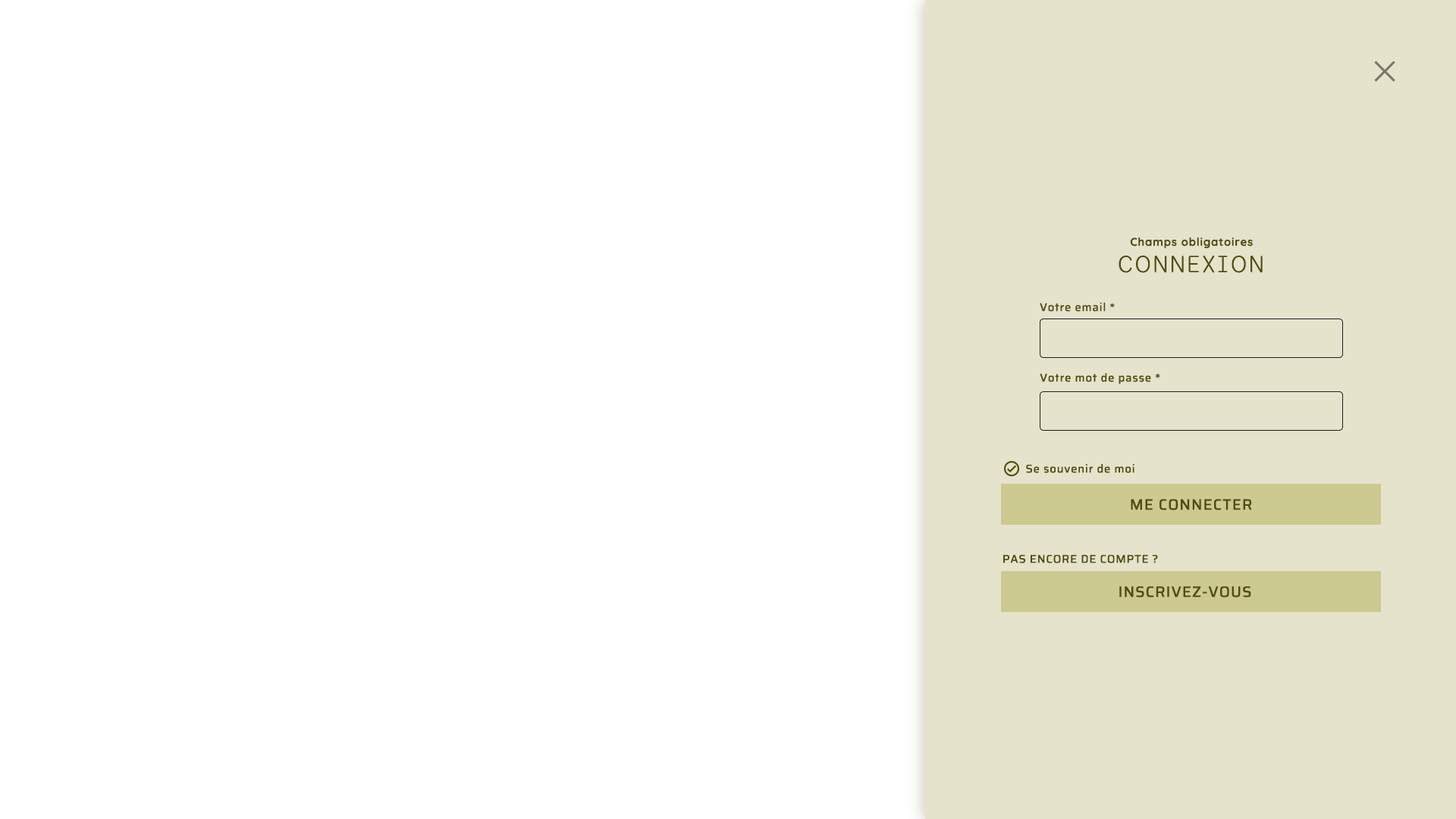
<style>
.page{position:relative;width:1456px;height:819px;background:#ffffff}
.page>*{position:absolute;margin:0}
.t1{font:11.4px "Quicksand-Bold";letter-spacing:0.05em;color:#524b0b}
.t2{font:26.5px "Sono-Light";letter-spacing:0.05em;color:#524b0b}
.t3{font:11.4px "Saira-Medium";letter-spacing:0.05em;color:#524b0b}
.t4{font:15.2px "Saira-Medium";letter-spacing:0.05em;color:#524b0b}
</style>
<div class="page">
<p class="t1" style="left:1130px;top:237px;width:123px;height:12px">Champs obligatoires</p>
<p class="t2" style="left:1119px;top:256px;width:144px;height:17px">CONNEXION</p>
<p class="t3" style="left:1040px;top:303px;width:75px;height:9px">Votre email *</p>
<p class="t3" style="left:1040px;top:373px;width:120px;height:11px">Votre mot de passe *</p>
<p class="t3" style="left:1026px;top:464px;width:108px;height:9px">Se souvenir de moi</p>
<p class="t4" style="left:1131px;top:499px;width:121px;height:11px">ME CONNECTER</p>
<p class="t3" style="left:1003px;top:554px;width:155px;height:9px">PAS ENCORE DE COMPTE ?</p>
<p class="t4" style="left:1119px;top:586px;width:132px;height:12px">INSCRIVEZ-VOUS</p>
</div>
